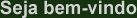
<style>
.page{position:relative;width:137px;height:18px;background:#173211}
.page>*{position:absolute;margin:0}
.t1{font:18.5px "Arial-BoldMT";color:#d4d4d4}
</style>
<div class="page">
<p class="t1" style="left:0px;top:0px;width:137px;height:18px">Seja bem-vindo</p>
</div>
